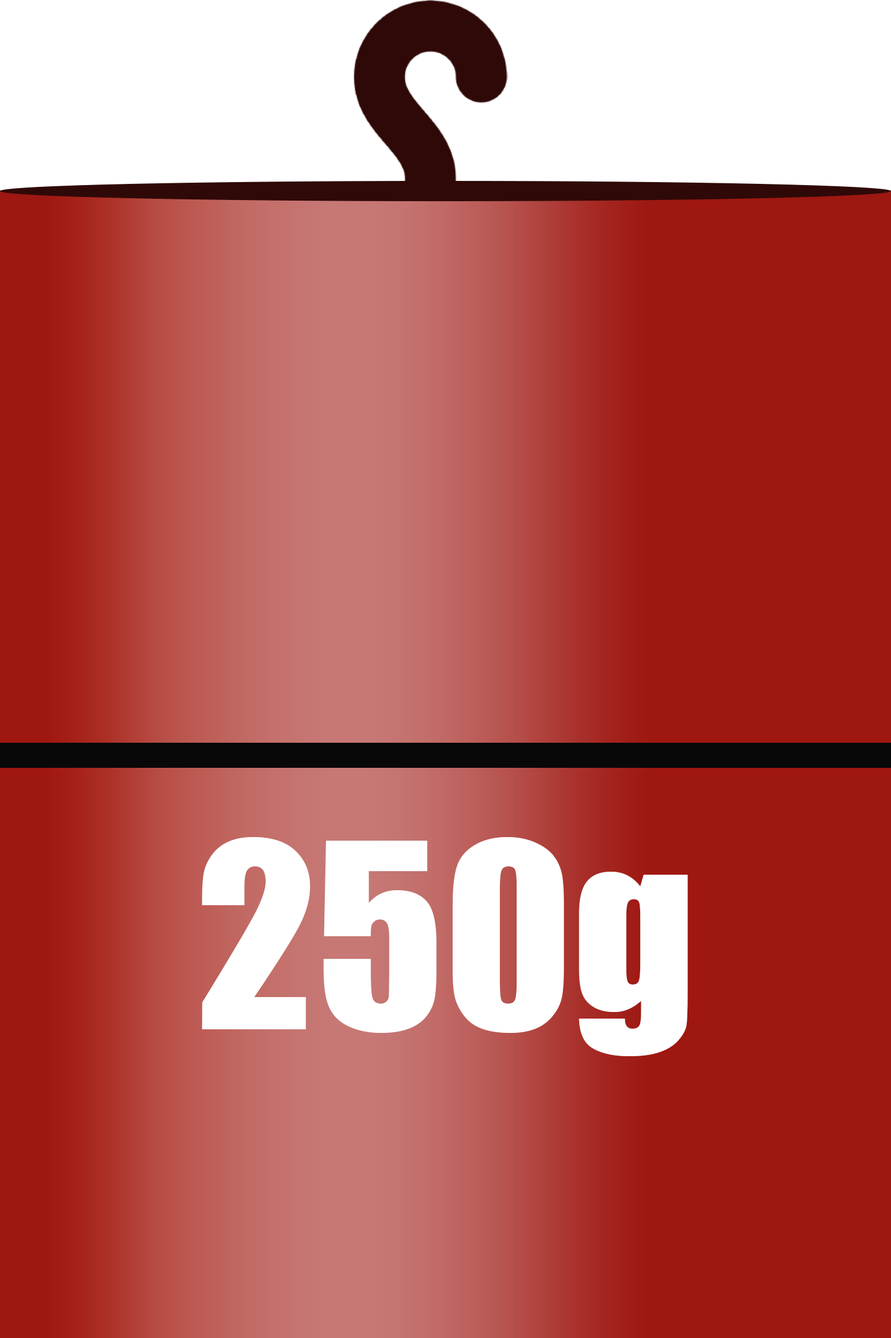
<style>
.page{position:relative;width:891px;height:1338px;background:#9e1711}
.page>*{position:absolute;margin:0}
.t1{font:238.9px "Impact";color:#ffffff}
</style>
<div class="page">
<p class="t1" style="left:202px;top:837px;width:486px;height:219px">250g</p>
</div>
